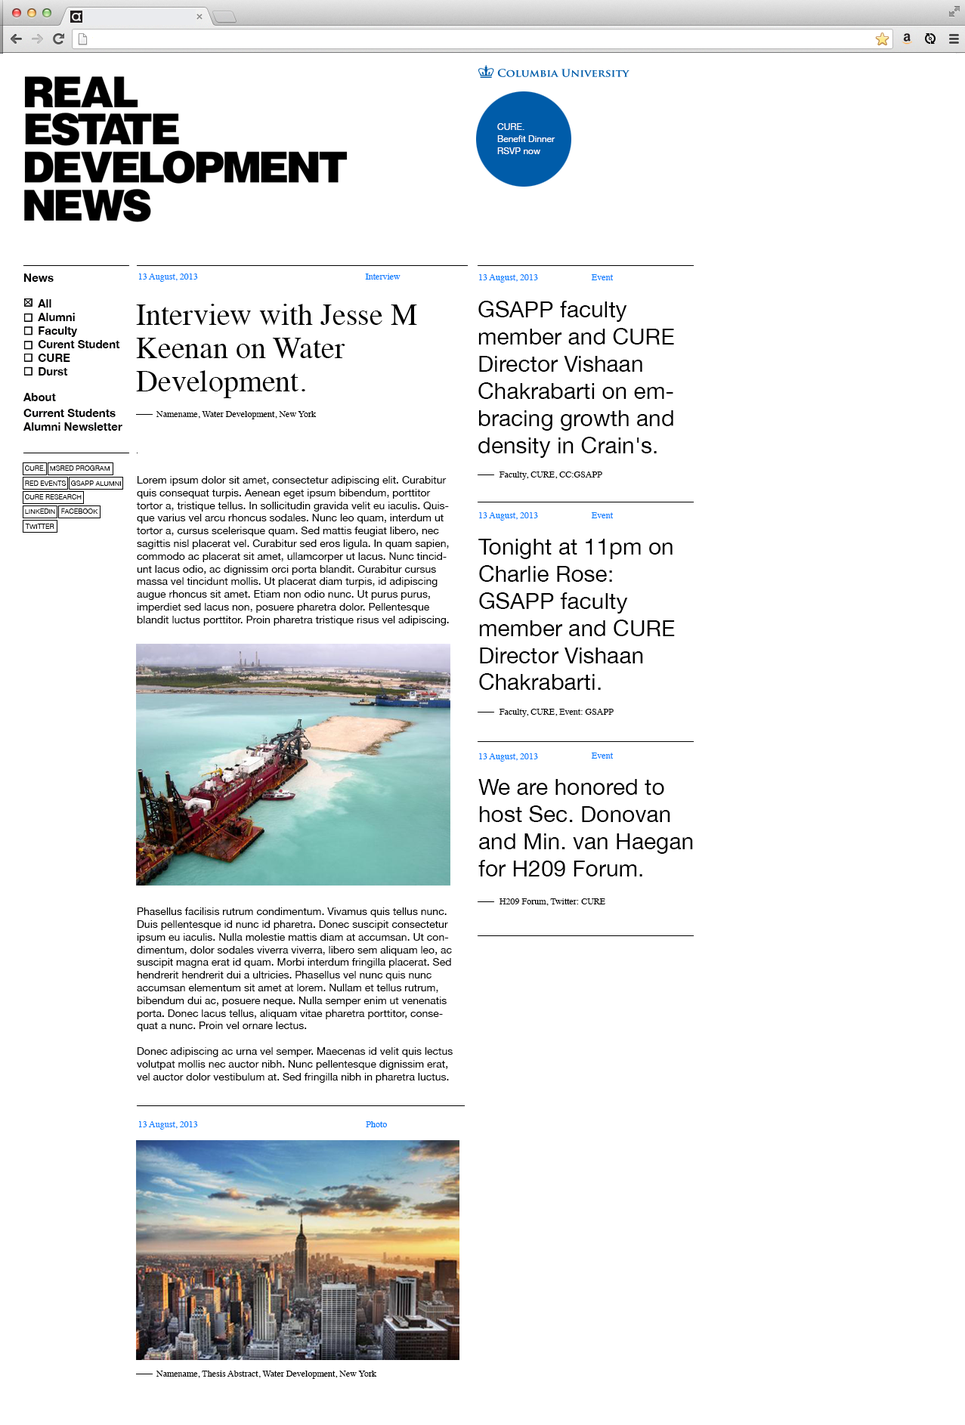
<style>
.page{position:relative;width:965px;height:1425px;background:#ffffff}
.page>*{position:absolute;margin:0}
.t1{font:9.1px/12.1px "HelveticaNeue";color:#ffffff}
.t2{font:11.3px "HelveticaNeue-Bold";color:#000001}
.t3{font:9px "Times-Roman";color:#007eff}
.t4{font:30.2px/33.2px "Times-Roman";color:#000000}
.t5{font:22.7px "HelveticaNeue";color:#000000}
.t6{font:9px "Times-Roman";color:#000000}
.t7{font:6.8px "HelveticaNeue";color:#000000}
.t8{font:9.1px "Times-Roman";color:#000000}
.t9{font:10.6px "HelveticaNeue";color:#000000}
.t10{font:22.6px "HelveticaNeue";color:#000000}
.t11{font:9.1px "Times-Roman";color:#007eff}
</style>
<div class="page">
<p class="t1" style="left:497px;top:123px;width:58px;height:31px">CURE. <br>Benefit Dinner<br>RSVP now</p>
<p class="t2" style="left:23px;top:274px;width:31px;height:8px">News</p>
<p class="t3" style="left:139px;top:274px;width:59px;height:8px">13 August, 2013</p>
<p class="t3" style="left:365px;top:274px;width:35px;height:6px">Interview</p>
<p class="t3" style="left:479px;top:274px;width:59px;height:9px">13 August, 2013</p>
<p class="t3" style="left:592px;top:274px;width:21px;height:6px">Event</p>
<p class="t2" style="left:38px;top:299px;width:82px;height:76px">All<br>Alumni<br>Faculty<br>Curent Student<br>CURE<br>Durst</p>
<p class="t4" style="left:136px;top:304px;width:281px;height:94px">Interview with Jesse M Keenan on Water <br>Development.</p>
<p class="t5" style="left:478px;top:301px;width:196px;height:157px">GSAPP faculty member and CURE Director Vishaan Chakrabarti on embracing growth and density in Crain's.</p>
<p class="t2" style="left:23px;top:393px;width:33px;height:8px">About</p>
<p class="t2" style="left:23px;top:409px;width:93px;height:8px">Current Students</p>
<p class="t6" style="left:156px;top:411px;width:161px;height:8px">Namename, Water Development, New York</p>
<p class="t2" style="left:23px;top:422px;width:99px;height:9px">Alumni Newsletter</p>
<p class="t7" style="left:25px;top:465px;width:20px;height:6px">CURE.</p>
<p class="t7" style="left:50px;top:465px;width:60px;height:6px">MSRED PROGRAM</p>
<p class="t8" style="left:499px;top:471px;width:103px;height:9px">Faculty, CURE, CC:GSAPP</p>
<p class="t7" style="left:25px;top:481px;width:41px;height:5px">RED EVENTS</p>
<p class="t7" style="left:71px;top:481px;width:50px;height:5px">GSAPP ALUMNI</p>
<p class="t9" style="left:137px;top:476px;width:316px;height:607px">Lorem ipsum dolor sit amet, consectetur adipiscing elit. Curabitur quis consequat turpis. Aenean eget ipsum bibendum, porttitor tortor a, tristique tellus. In sollicitudin gravida velit eu iaculis. Quisque varius vel arcu rhoncus sodales. Nunc leo quam, interdum ut tortor a, cursus scelerisque quam. Sed mattis feugiat libero, nec sagittis nisl placerat vel. Curabitur sed eros ligula. In quam sapien, commodo ac placerat sit amet, ullamcorper ut lacus. Nunc tincidunt lacus odio, ac dignissim orci porta blandit. Curabitur cursus massa vel tincidunt mollis. Ut placerat diam turpis, id adipiscing augue rhoncus sit amet. Etiam non odio nunc. Ut purus purus, imperdiet sed lacus non, posuere pharetra dolor. Pellentesque blandit luctus porttitor. Proin pharetra tristique risus vel adipiscing.<br><br><br><br><br><br><br><br><br><br><br><br><br><br><br><br><br><br><br><br><br><br><br>Phasellus facilisis rutrum condimentum. Vivamus quis tellus nunc. Duis pellentesque id nunc id pharetra. Donec suscipit consectetur ipsum eu iaculis. Nulla molestie mattis diam at accumsan. Ut condimentum, dolor sodales viverra viverra, libero sem aliquam leo, ac suscipit magna erat id quam. Morbi interdum fringilla placerat. Sed hendrerit hendrerit dui a ultricies. Phasellus vel nunc quis nunc accumsan elementum sit amet at lorem. Nullam et tellus rutrum, bibendum dui ac, posuere neque. Nulla semper enim ut venenatis porta. Donec lacus tellus, aliquam vitae pharetra porttitor, consequat a nunc. Proin vel ornare lectus.<br><br>Donec adipiscing ac urna vel semper. Maecenas id velit quis lectus volutpat mollis nec auctor nibh. Nunc pellentesque dignissim erat, vel auctor dolor vestibulum at. Sed fringilla nibh in pharetra luctus. Cras sodales odio erat, non lacinia mi interdum sit amet. Donec laoreet neque sit amet dapibus sodales. Proin pellentesque, erat a sodales suscipit, sapien lectus ultricies mauris, vitae ultrices tellus ligula non felis. Nunc tristique, odio sed dictum convallis, diam velit elementum arcu, vitae euismod metus urna id magna.<br><br>Aliquam non tristique est, sit amet aliquet turpis. Praesent a dolor quis quam viverra tincidunt sit amet nec lacus. Aenean id sagittis nisi. Sed lacinia tristique aliquam. Donec porta libero a condimentum adipiscing. Vivamus leo justo, porttitor a erat in, cursus pretium risus. Proin dignissim orci justo, quis convallis mauris tincidunt in. Curabitur id aliquam justo. Cras pulvinar mi diam, at hendrerit ipsum pulvinar sit amet. Duis arcu nisl, sodales sit amet purus dapibus, iaculis malesuada purus. Etiam suscipit ornare tellus a pellentesque. Aliquam sed odio rutrum, dignissim dolor quis, commodo dui.<br><br>Pellentesque ut quam tortor. Vestibulum ante ipsum primis in faucibus orci luctus et ultrices posuere cubilia Curae; Lorem ipsum dolor sit amet, consectetur adipiscing elit. In egestas dui id lacus iaculis, eu consequat justo luctus. Aliquam a erat eget erat ullamcorper porttitor. Fusce mattis aliquet mauris sit amet egestas. Donec ultrices dui vitae felis venenatis fermentum. Aliquam quis rhoncus eros, at vulputate dui. Suspendisse potenti. Phasellus vitae magna tellus. Praesent nec adipiscing urna, faucibus imperdiet nisl. Aliquam ut nibh mi. Ut sapien ligula, laoreet nec quam eu, tincidunt vestibulum lectus. Duis turpis mi, semper fermentum lorem et, ornare ultrices velit.</p>
<p class="t7" style="left:25px;top:494px;width:57px;height:5px">CURE RESEARCH</p>
<p class="t7" style="left:25px;top:508px;width:30px;height:6px">LINKEDIN</p>
<p class="t7" style="left:61px;top:508px;width:37px;height:6px">FACEBOOK</p>
<p class="t3" style="left:479px;top:512px;width:59px;height:9px">13 August, 2013</p>
<p class="t3" style="left:592px;top:512px;width:21px;height:6px">Event</p>
<p class="t7" style="left:25px;top:524px;width:29px;height:5px">TWITTER</p>
<p class="t10" style="left:478px;top:539px;width:197px;height:151px">Tonight at 11pm on <br>Charlie Rose: GSAPP faculty member and CURE Director Vishaan Chakrabarti.</p>
<p class="t8" style="left:499px;top:709px;width:114px;height:8px">Faculty, CURE, Event: GSAPP</p>
<p class="t3" style="left:479px;top:753px;width:59px;height:9px">13 August, 2013</p>
<p class="t3" style="left:592px;top:753px;width:21px;height:6px">Event</p>
<p class="t5" style="left:478px;top:779px;width:215px;height:97px">We are honored to host Sec. Donovan and Min. van Haegan for H209 Forum.</p>
<p class="t8" style="left:499px;top:898px;width:106px;height:8px">H209 Forum, Twitter: CURE</p>
<p class="t3" style="left:139px;top:1121px;width:59px;height:9px">13 August, 2013</p>
<p class="t11" style="left:366px;top:1121px;width:21px;height:6px">Photo</p>
<p class="t8" style="left:156px;top:1371px;width:221px;height:8px">Namename, Thesis Abstract, Water Development, New York</p>
</div>
